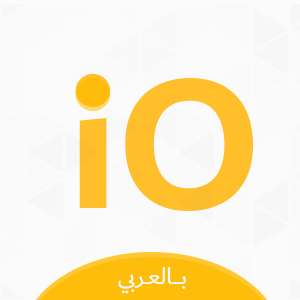
<style>
.page{position:relative;width:300px;height:300px;background:#fbfbfb}
.page>*{position:absolute;margin:0}
.t1{font:195.8px "DubaiW23-Bold";color:#febf2b}
.t2{font:24.3px "DubaiW23-Regular";color:#ffffff}
</style>
<div class="page">
<p class="t1" style="left:75px;top:73px;width:179px;height:138px">iO</p>
<p class="t2" style="left:118px;top:267px;width:68px;height:27px">بــــالعـربي</p>
</div>
